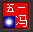
<style>
.page{position:relative;width:33px;height:32px;background:#f20000}
.page>*{position:absolute;margin:0}
.t1{font:10.4px "SimSun";color:#ffffff}
.t2{font:11.7px "SimSun";color:#ffffff}
</style>
<div class="page">
<p class="t1" style="left:7px;top:4px;width:18px;height:8px">五一</p>
<p class="t2" style="left:16px;top:15px;width:11px;height:12px">冯</p>
</div>
